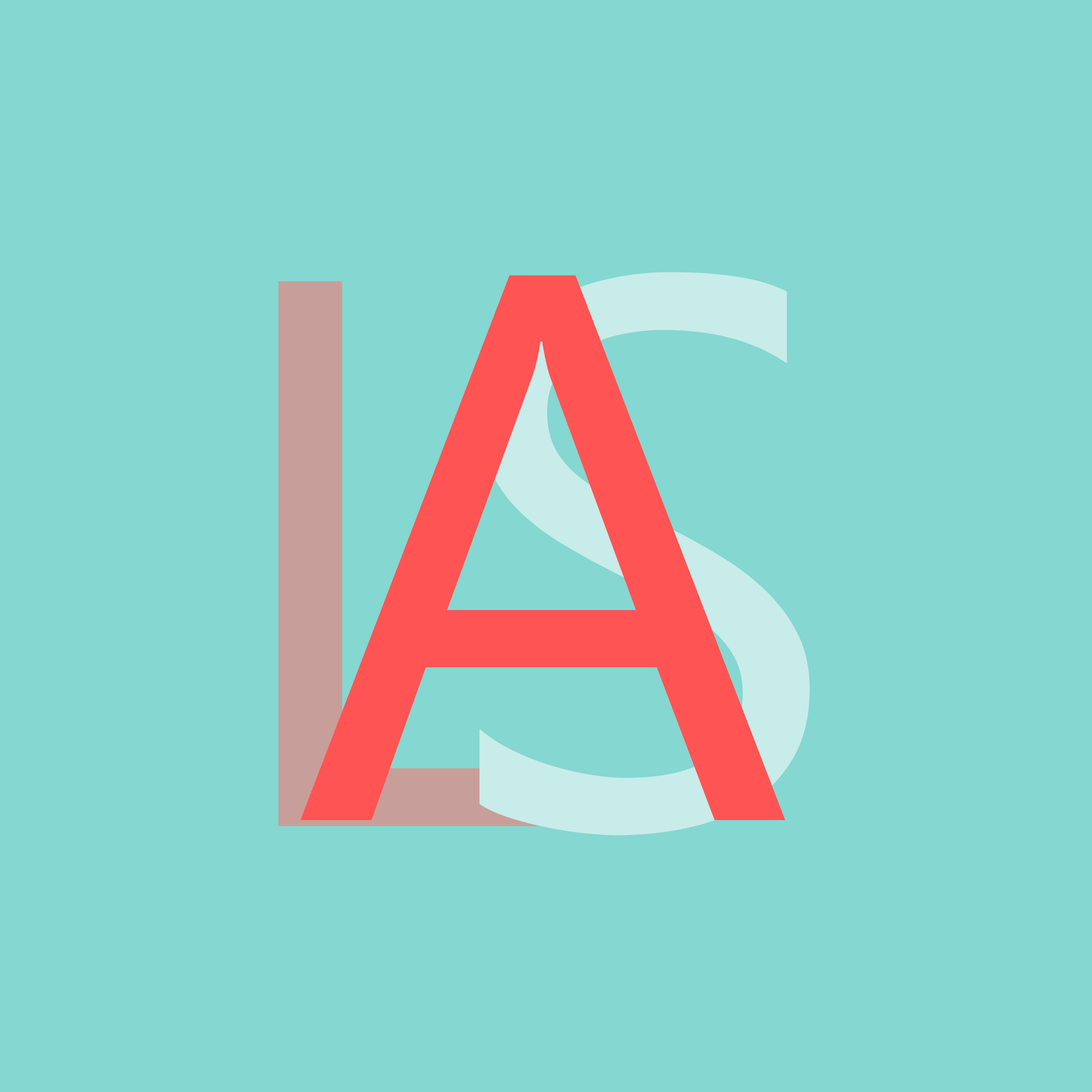
<style>
.page{position:relative;width:1092px;height:1092px;background:#85d7d1}
.page>*{position:absolute;margin:0}
.t1{font:778px "SegoeUI";letter-spacing:-0.18em}
.t2{font:778px "SegoeUI";letter-spacing:-0.18em;color:#ff5454}
</style>
<div class="page">
<p class="t1" style="left:278px;top:272px;width:532px;height:563px">LS</p>
<p class="t2" style="left:300px;top:275px;width:486px;height:545px">A</p>
</div>
